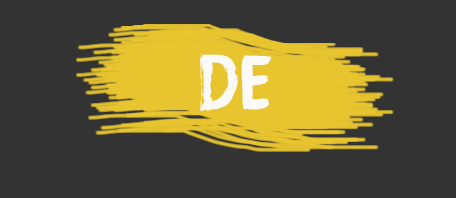
<style>
.page{position:relative;width:456px;height:198px;background:#333333}
.page>*{position:absolute;margin:0}
.t1{font:85px "MidnightSunDEMO-Regular";color:#fbfaf7}
</style>
<div class="page">
<p class="t1" style="left:199px;top:54px;width:73px;height:58px">DE</p>
</div>
